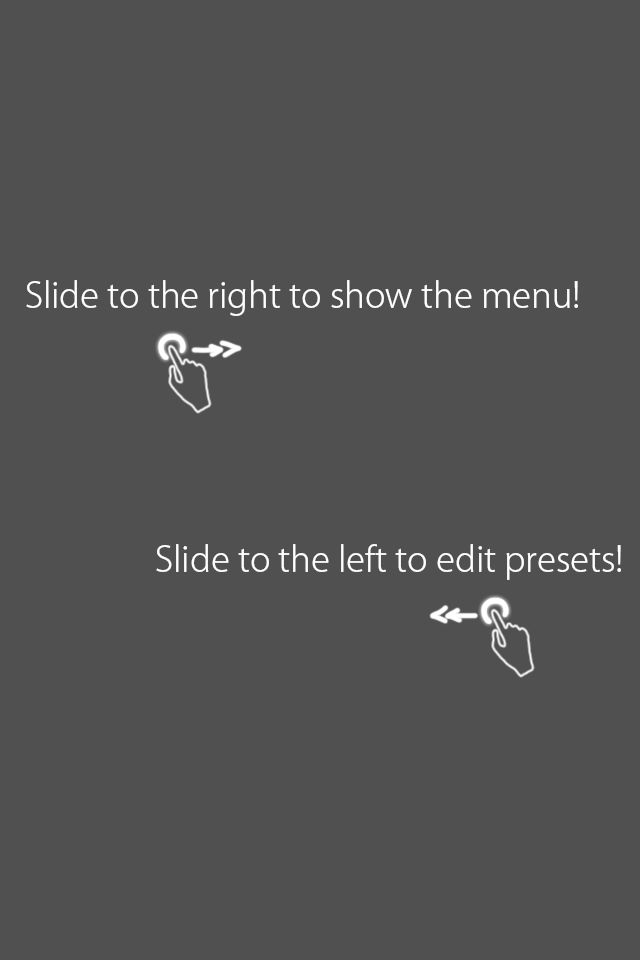
<style>
.page{position:relative;width:640px;height:960px;background:#505050}
.page>*{position:absolute;margin:0}
.t1{font:34.7px "KozGoPr6N-Light";color:#ffffff}
</style>
<div class="page">
<p class="t1" style="left:26px;top:280px;width:552px;height:36px">Slide to the right to show the menu!</p>
<p class="t1" style="left:156px;top:544px;width:465px;height:36px">Slide to the left to edit presets!</p>
</div>
